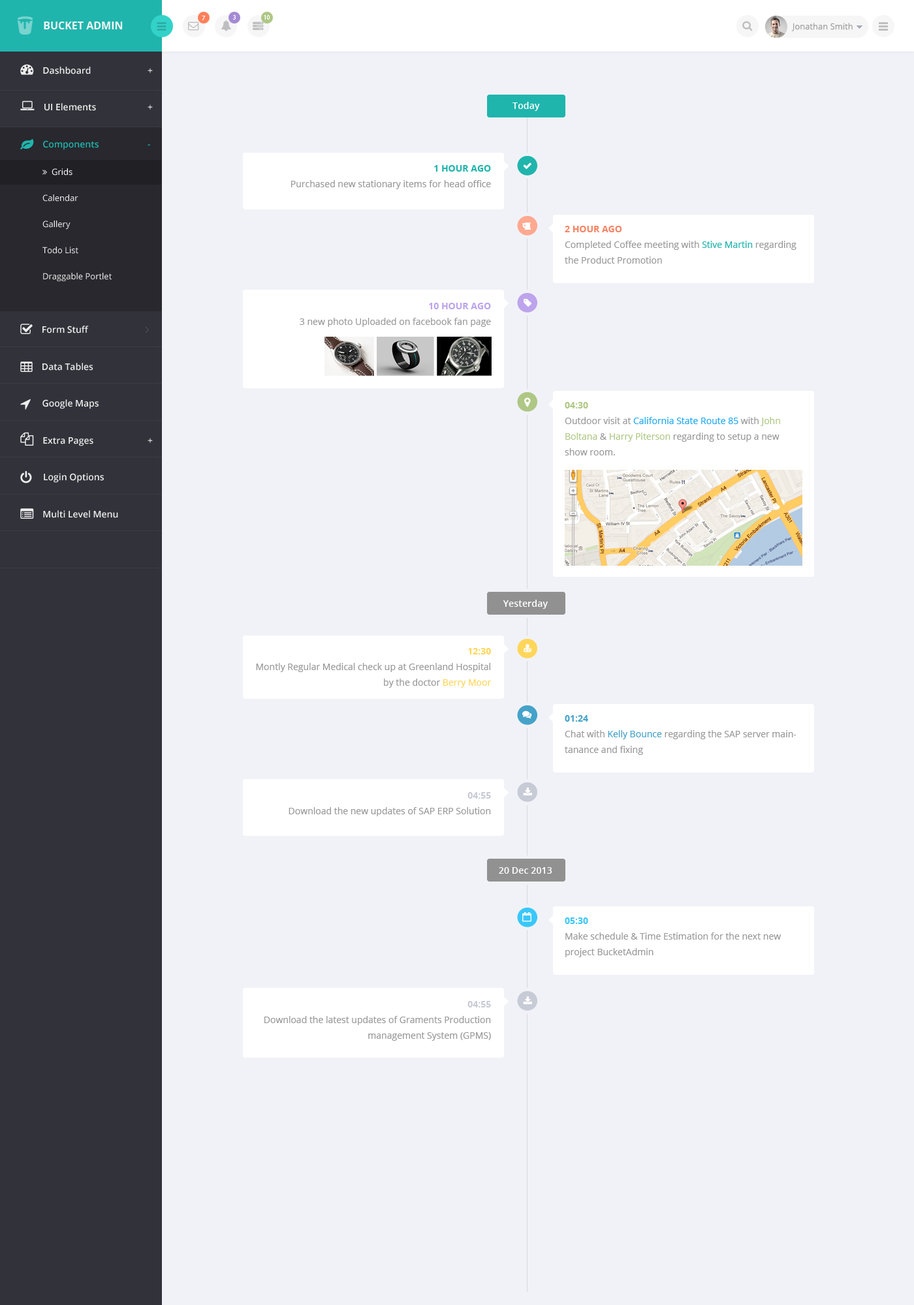
<style>
.page{position:relative;width:914px;height:1305px;background:#f1f2f7}
.page>*{position:absolute;margin:0}
.t1{font:6.5px "MyriadPro-Regular";color:#ffffff}
.t2{font:10.4px "OpenSans-Bold";color:#f6f6f6}
.t3{font:8.5px "OpenSans";color:#a4a4a4}
.t4{font:9.1px "OpenSans-Semibold";letter-spacing:0.01em;color:#ffffff}
.t5{font:9.1px/15.7px "OpenSans";color:#999999}
.t6{font:9.1px/15.7px "OpenSans-Bold";color:#1fb5ad;text-transform:uppercase}
.t7{font:9.1px/15.7px "OpenSans-Bold";color:#f58465;text-transform:uppercase}
.t8{font:9.1px/15.7px "OpenSans";color:#1fb5ad}
.t9{font:9.1px/15.7px "OpenSans-Bold";color:#bda4ec;text-transform:uppercase}
.t10{font:9.1px/15.7px "OpenSans-Bold";color:#aec785;text-transform:uppercase}
.t11{font:9.1px/15.7px "OpenSans";color:#20aaf1}
.t12{font:9.1px/15.7px "OpenSans";color:#aec785}
.t13{font:9.1px/15.7px "OpenSans-Bold";color:#fed65a;text-transform:uppercase}
.t14{font:9.1px/15.7px "OpenSans";color:#fed65a}
.t15{font:9.1px/15.7px "OpenSans-Bold";color:#45a2c9;text-transform:uppercase}
.t16{font:9.1px/15.7px "OpenSans";color:#45a2c9}
.t17{font:9.1px/15.7px "OpenSans-Bold";color:#c7cbd6;text-transform:uppercase}
.t18{font:9.1px/15.7px "OpenSans-Bold";color:#3ac7f9;text-transform:uppercase}
</style>
<div class="page">
<p class="t1" style="left:202px;top:16px;width:3px;height:4px">7</p>
<p class="t1" style="left:232px;top:15px;width:4px;height:5px">3</p>
<p class="t1" style="left:264px;top:15px;width:6px;height:5px">10</p>
<p class="t2" style="left:44px;top:22px;width:79px;height:7px">BUCKET ADMIN</p>
<p class="t3" style="left:791px;top:23px;width:61px;height:8px">Jonathan Smith</p>
<p class="t4" style="left:512px;top:102px;width:28px;height:9px">Today</p>
<p class="t5" style="left:291px;top:165px;width:200px;height:24px;text-align:right"><span class="t6">1 hour ago<br></span>Purchased new stationary items for head office</p>
<p class="t5" style="left:564px;top:226px;width:232px;height:38px"><span class="t7">2 hour ago<br></span>Completed Coffee meeting with <span class="t8">Stive Martin</span> regarding the Product Promotion</p>
<p class="t5" style="left:300px;top:303px;width:191px;height:24px;text-align:right"><span class="t9">10 hour ago<br></span>3 new photo Uploaded on facebook fan page</p>
<p class="t5" style="left:564px;top:402px;width:216px;height:54px"><span class="t10">04:30<br></span>Outdoor visit at <span class="t11">California State Route 85</span> with <span class="t12">John Boltana </span>&amp; <span class="t12">Harry Piterson </span>regarding to setup a new show room.</p>
<p class="t4" style="left:502px;top:600px;width:46px;height:9px">Yesterday</p>
<p class="t5" style="left:256px;top:648px;width:235px;height:40px;text-align:right"><span class="t13">12:30<br></span>Montly Regular Medical check up at Greenland Hospital by the doctor <span class="t14">Berry Moor</span></p>
<p class="t5" style="left:564px;top:715px;width:232px;height:40px"><span class="t15">01:24<br></span>Chat with <span class="t16">Kelly Bounce</span> regarding the SAP server maintanance and fixing</p>
<p class="t5" style="left:288px;top:792px;width:203px;height:24px;text-align:right"><span class="t17">04:55<br></span>Download the new updates of SAP ERP Solution</p>
<p class="t4" style="left:499px;top:867px;width:53px;height:7px">20 Dec 2013</p>
<p class="t5" style="left:564px;top:918px;width:216px;height:39px"><span class="t18">05:30<br></span>Make schedule &amp; Time Estimation for the next new project BucketAdmin</p>
<p class="t5" style="left:264px;top:1001px;width:227px;height:40px;text-align:right"><span class="t17">04:55<br></span>Download the latest updates of Graments Production management System (GPMS)</p>
</div>
